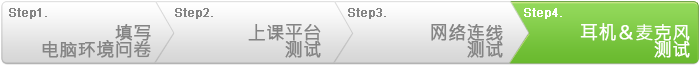
<style>
.page{position:relative;width:700px;height:65px}
.page>*{position:absolute;margin:0}
.t1{font:12px "ArialMT";color:#848484;font-weight:bold}
.t2{font:12px "ArialMT";color:#ffffff;font-weight:bold}
.t3{font:18px/17px "MicrosoftJhengHeiRegular";color:#848484;font-weight:bold}
.t4{font:18px/17px "MicrosoftJhengHeiRegular";color:#ffffff;font-weight:bold}
</style>
<div class="page">
<p class="t1" style="left:9px;top:8px;width:38px;height:11px">Step1.</p>
<p class="t1" style="left:175px;top:8px;width:38px;height:11px">Step2.</p>
<p class="t1" style="left:348px;top:8px;width:38px;height:11px">Step3.</p>
<p class="t2" style="left:524px;top:8px;width:38px;height:11px">Step4.</p>
<p class="t3" style="left:42px;top:24px;width:109px;height:34px;text-align:right">填写<br>电脑环境问卷</p>
<p class="t3" style="left:248px;top:24px;width:73px;height:34px;text-align:right">上课平台<br>测试</p>
<p class="t3" style="left:431px;top:24px;width:72px;height:34px;text-align:right">网络连线<br>测试</p>
<p class="t4" style="left:580px;top:23px;width:110px;height:35px;text-align:right">耳机＆麦克风<br>测试</p>
</div>
